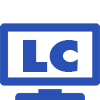
<style>
.page{position:relative;width:100px;height:100px;background:#ffffff}
.page>*{position:absolute;margin:0}
.t1{font:65px "DBErawanX";color:#2951b5}
</style>
<div class="page">
<p class="t1" style="left:23px;top:40px;width:55px;height:32px">LC</p>
</div>
